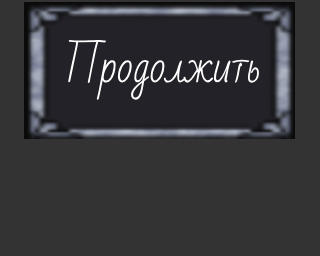
<style>
.page{position:relative;width:320px;height:256px;background:#333333}
.page>*{position:absolute;margin:0}
.t1{font:43px "BadScript-Regular";color:#ffffff}
</style>
<div class="page">
<p class="t1" style="left:68px;top:39px;width:191px;height:61px">Продолжить</p>
</div>
